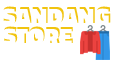
<style>
.page{position:relative;width:128px;height:64px;background:#ffffff}
.page>*{position:absolute;margin:0}
.t1{font:24px "TitilliumWeb-Black";color:#ffffff}
</style>
<div class="page">
<p class="t1" style="left:2px;top:8px;width:107px;height:18px">SANDANG</p>
<p class="t1" style="left:2px;top:28px;width:70px;height:18px">STORE</p>
</div>
